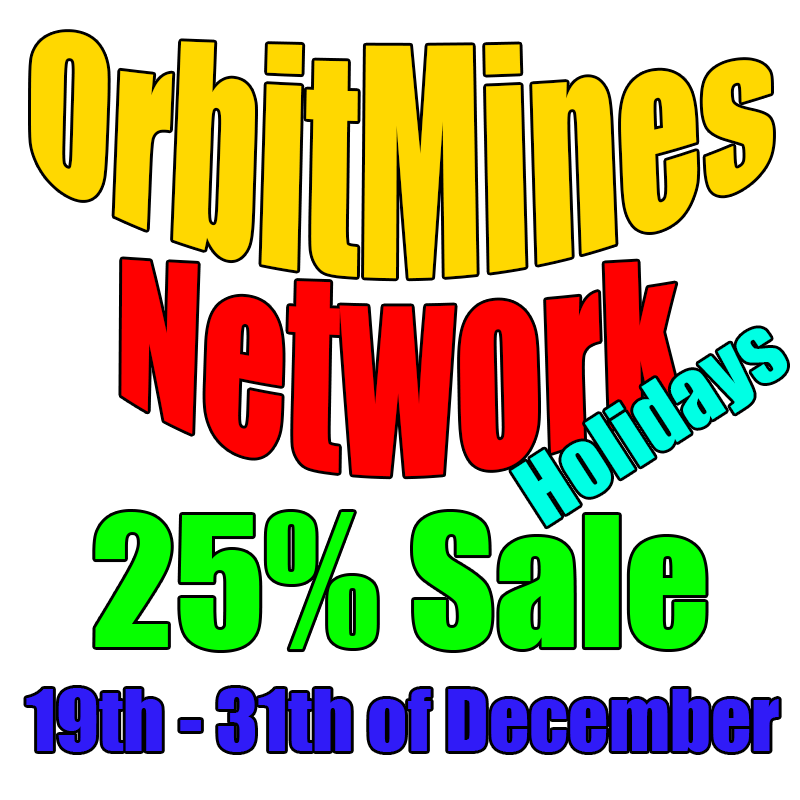
<style>
.page{position:relative;width:800px;height:800px;background:#ffffff}
.page>*{position:absolute;margin:0}
.t1{font:166.7px "Impact";color:#ffd800}
.t2{font:166.7px "Impact";color:#ff0000}
.t3{font:83.3px "Impact";color:#00ffe4}
.t4{font:79.2px "Impact";color:#301bf7}
</style>
<div class="page">
<p class="t1" style="left:31px;top:32px;width:742px;height:247px">OrbitMines</p>
<p class="t2" style="left:121px;top:259px;width:558px;height:218px">Network</p>
<p class="t3" style="left:511px;top:328px;width:276px;height:199px;rotate:-33deg">Holidays</p>
<p class="t4" style="left:26px;top:688px;width:753px;height:64px">19th - 31th of December</p>
</div>
